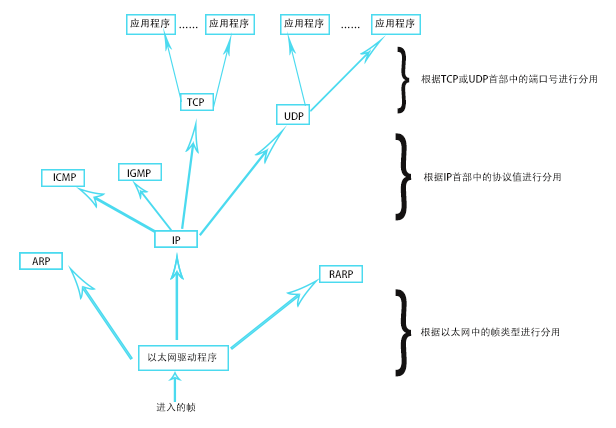
<style>
.page{position:relative;width:616px;height:428px;background:#ffffff}
.page>*{position:absolute;margin:0}
.t1{font:10px "AdobeHeitiStd-Regular";color:#141212}
.t2{font:73.7px "AdobeHeitiStd-Regular";color:#141212;scale:0.62 1}
.t3{font:96.4px "AdobeHeitiStd-Regular";color:#141212;scale:0.62 1}
</style>
<div class="page">
<p class="t1" style="left:179px;top:26px;width:19px;height:3px">……</p>
<p class="t1" style="left:341px;top:26px;width:19px;height:3px">……</p>
<p class="t2" style="left:397px;top:46px;width:13px;height:68px">}</p>
<p class="t1" style="left:421px;top:74px;width:176px;height:10px">根据TCP或UDP首部中的端口号进行分用</p>
<p class="t1" style="left:187px;top:98px;width:17px;height:8px">TCP</p>
<p class="t1" style="left:284px;top:112px;width:20px;height:8px">UDP</p>
<p class="t3" style="left:395px;top:133px;width:17px;height:88px">}</p>
<p class="t1" style="left:53px;top:173px;width:23px;height:8px">ICMP</p>
<p class="t1" style="left:127px;top:169px;width:24px;height:8px">IGMP</p>
<p class="t1" style="left:423px;top:172px;width:138px;height:10px">根据IP首部中的协议值进行分用</p>
<p class="t1" style="left:172px;top:236px;width:9px;height:8px">IP</p>
<p class="t1" style="left:32px;top:257px;width:18px;height:8px">ARP</p>
<p class="t1" style="left:329px;top:270px;width:24px;height:8px">RARP</p>
<p class="t3" style="left:395px;top:289px;width:17px;height:88px">}</p>
<p class="t1" style="left:420px;top:327px;width:139px;height:10px">根据以太网中的帧类型进行分用</p>
<p class="t1" style="left:148px;top:352px;width:69px;height:10px">以太网驱动程序</p>
<p class="t1" style="left:156px;top:402px;width:40px;height:10px">进入的帧</p>
</div>
